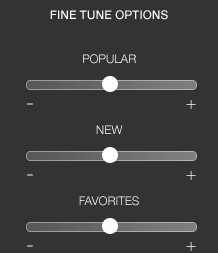
<style>
.page{position:relative;width:218px;height:253px;background:#333333}
.page>*{position:absolute;margin:0}
.t1{font:12px "HelveticaNeue-Medium";color:#ffffff;text-transform:uppercase}
.t2{font:12px "HelveticaNeue-Light";text-transform:uppercase}
.t3{font:18px "HelveticaNeue-Thin"}
.t4{font:26px "HelveticaNeue-Thin"}
.t5{font:12px "HelveticaNeue-Light";color:#ffffff;text-transform:uppercase}
</style>
<div class="page">
<p class="t1" style="left:50px;top:10px;width:118px;height:10px">fine tune options</p>
<p class="t2" style="left:83px;top:54px;width:53px;height:10px">Popular</p>
<p class="t3" style="left:186px;top:100px;width:10px;height:9px">+</p>
<p class="t4" style="left:27px;top:103px;width:6px;height:2px">-</p>
<p class="t5" style="left:96px;top:125px;width:27px;height:9px">new</p>
<p class="t4" style="left:27px;top:174px;width:6px;height:2px">-</p>
<p class="t3" style="left:186px;top:171px;width:10px;height:9px">+</p>
<p class="t5" style="left:79px;top:196px;width:60px;height:10px">favorites</p>
<p class="t4" style="left:27px;top:245px;width:6px;height:2px">-</p>
<p class="t3" style="left:186px;top:242px;width:10px;height:9px">+</p>
</div>
